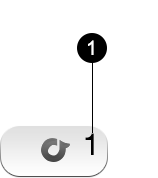
<style>
.page{position:relative;width:158px;height:178px;background:#ffffff}
.page>*{position:absolute;margin:0}
.t1{font:20px "ArialMT";color:#ffffff}
</style>
<div class="page">
<p class="t1" style="left:88px;top:40px;width:6px;height:15px">1</p>
</div>
